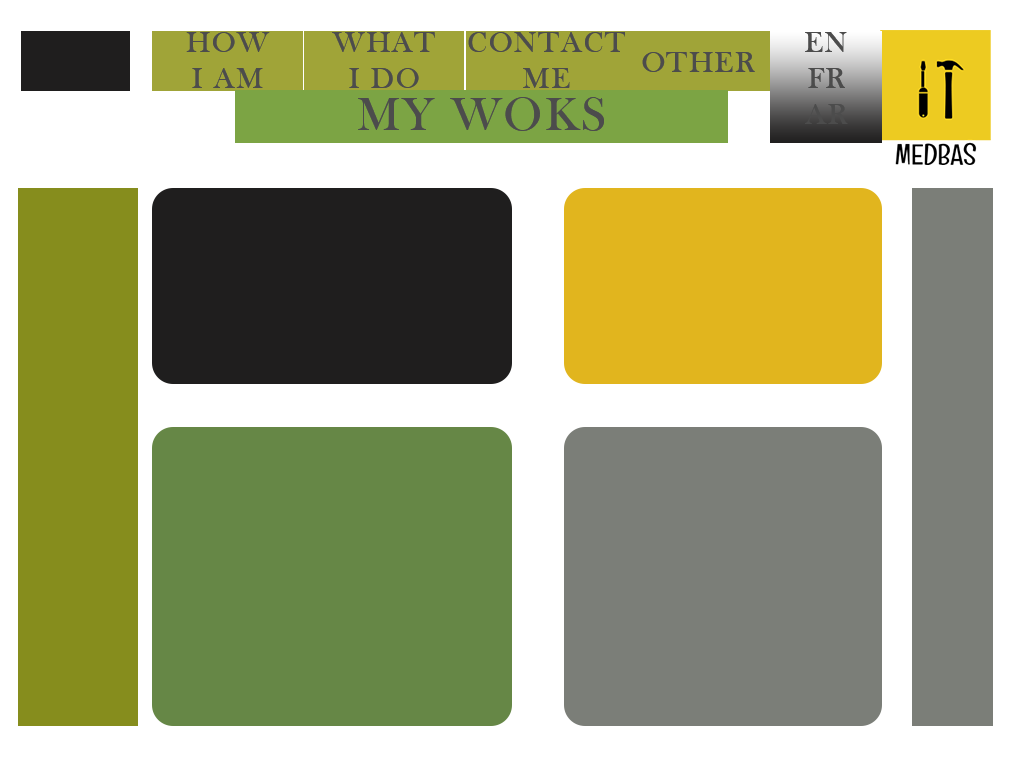
<style>
.page{position:relative;width:1024px;height:768px;background:#ffffff}
.page>*{position:absolute;margin:0}
.t1{font:30px "BaskOldFace";letter-spacing:0.05em;color:#4c4c4c}
.t2{font:48px "BaskOldFace";letter-spacing:0.05em;color:#4c4c4c}
</style>
<div class="page">
<p class="t1" style="left:186px;top:32px;width:84px;height:56px;text-align:center">HOW<br>I AM</p>
<p class="t1" style="left:332px;top:32px;width:103px;height:56px;text-align:center">WHAT <br>I DO</p>
<p class="t1" style="left:468px;top:32px;width:158px;height:56px;text-align:center">CONTACT<br>ME</p>
<p class="t1" style="left:805px;top:32px;width:43px;height:92px;text-align:center">EN<br>FR<br>AR</p>
<p class="t1" style="left:642px;top:52px;width:113px;height:20px">OTHER</p>
<p class="t2" style="left:358px;top:97px;width:246px;height:34px">MY WOKS</p>
</div>
